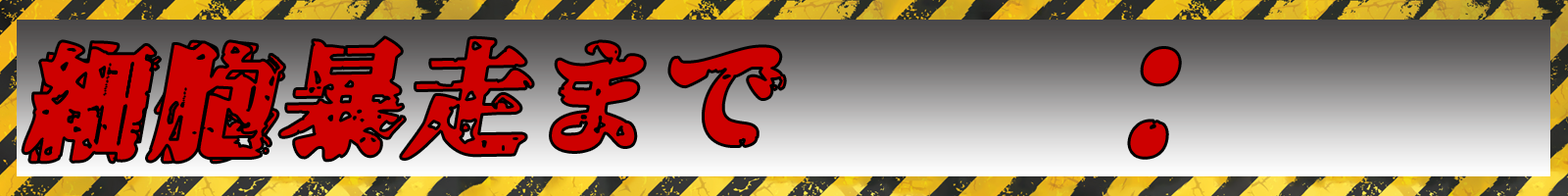
<style>
.page{position:relative;width:1568px;height:196px}
.page>*{position:absolute;margin:0}
.t1{font:122.5px "Genkaimincho";color:#cd0000;font-weight:bold;font-style:italic}
.t2{font:163.3px "Genkaimincho";color:#cd0000;font-weight:bold;font-style:italic}
</style>
<div class="page">
<p class="t1" style="left:23px;top:41px;width:262px;height:122px">細胞</p>
<p class="t1" style="left:29px;top:41px;width:255px;height:122px">肉体</p>
<p class="t1" style="left:279px;top:36px;width:507px;height:125px;rotate:-1deg">暴走まで</p>
<p class="t2" style="left:1129px;top:47px;width:52px;height:112px">：</p>
</div>
